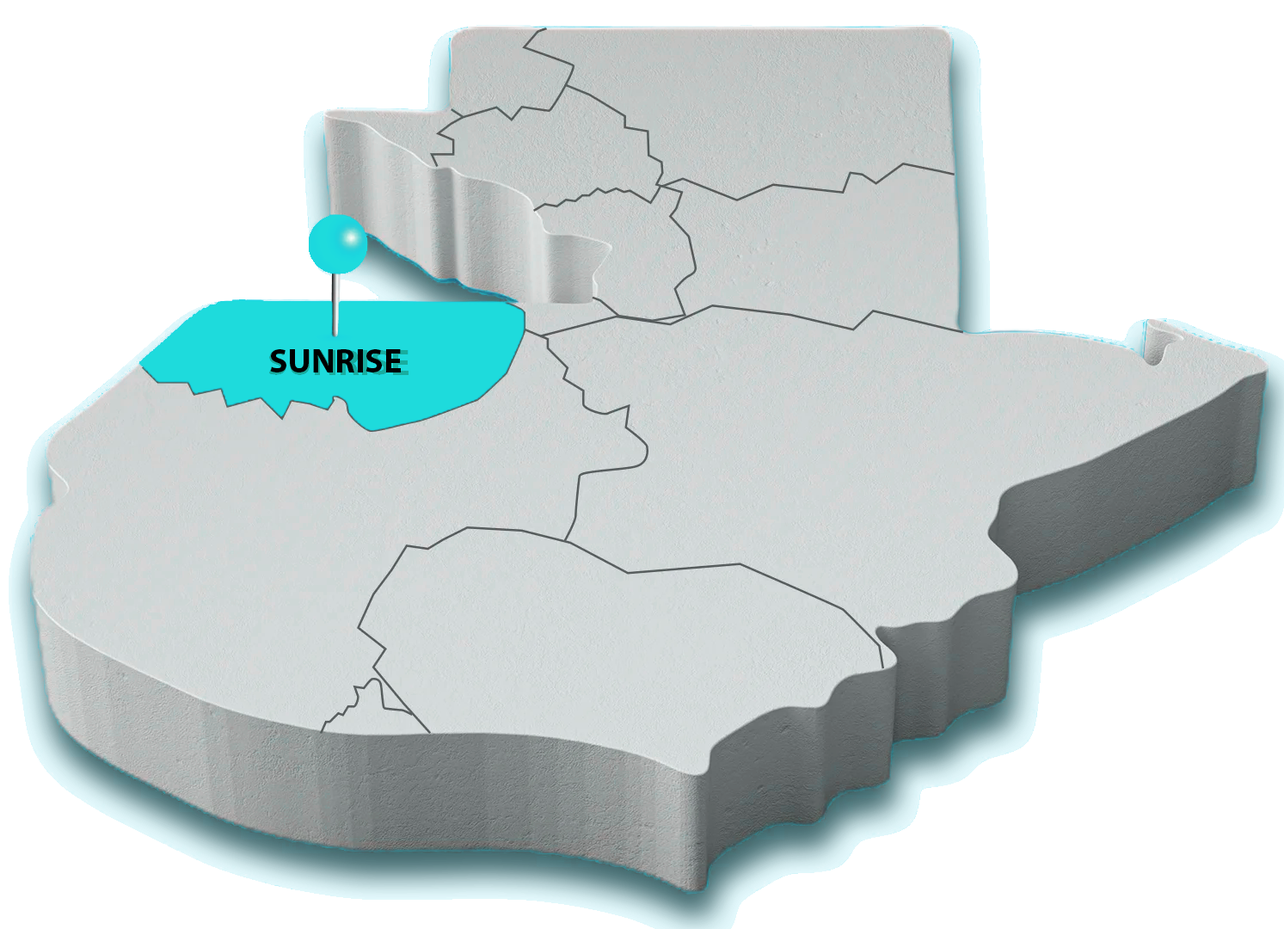
<style>
.page{position:relative;width:1284px;height:929px;background:#ffffff}
.page>*{position:absolute;margin:0}
.t1{font:34.4px "MyriadPro-Bold";color:#000000}
</style>
<div class="page">
<p class="t1" style="left:270px;top:349px;width:131px;height:23px">SUNRISE</p>
</div>
